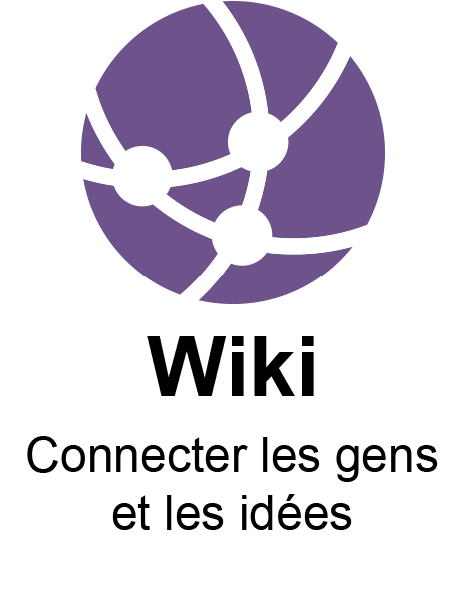
<style>
.page{position:relative;width:465px;height:600px;background:#ffffff}
.page>*{position:absolute;margin:0}
.t1{font:84px "Arial-BoldMT";color:#000000}
.t2{font:48px "ArialMT";color:#000000}
</style>
<div class="page">
<p class="t1" style="left:147px;top:336px;width:167px;height:60px">Wiki</p>
<p class="t2" style="left:27px;top:436px;width:411px;height:94px;text-align:center">Connecter les gens et les idées</p>
</div>
